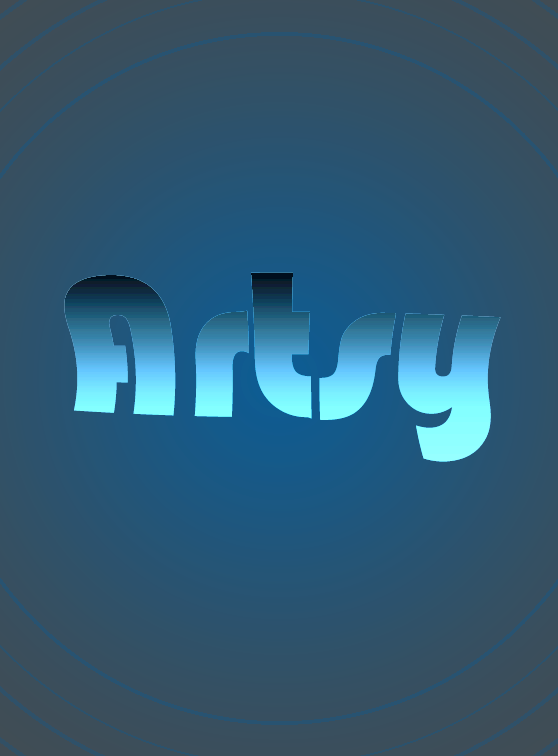
<style>
.page{position:relative;width:558px;height:756px}
.page>*{position:absolute;margin:0}
.t1{font:188.6px "Bauhaus93";scale:1.26 1}
</style>
<div class="page">
<p class="t1" style="left:64px;top:272px;width:437px;height:190px">Artsy</p>
<p class="t1" style="left:64px;top:272px;width:437px;height:190px">Artsy</p>
<p class="t1" style="left:64px;top:272px;width:437px;height:190px">Artsy</p>
<p class="t1" style="left:64px;top:272px;width:437px;height:190px">Artsy</p>
</div>
